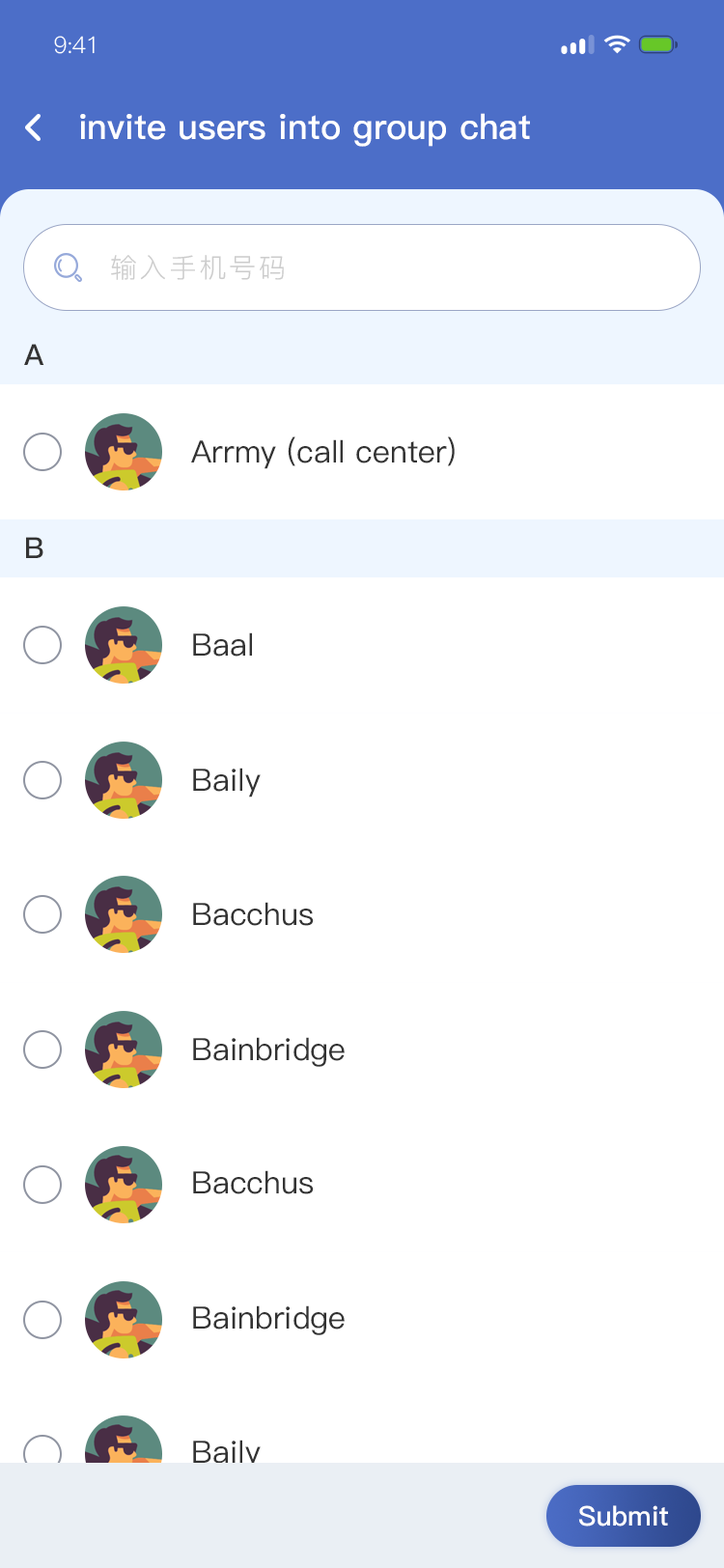
<style>
.page{position:relative;width:724px;height:1568px;background:#ffffff}
.page>*{position:absolute;margin:0}
.t1{font:23.2px "PingFang-SC-Regular";letter-spacing:-0.025em;color:#ffffff}
.t2{font:34.8px "PingFang-SC-Bold";color:#ffffff}
.t3{font:27px "PingFang-SC-Regular";letter-spacing:0.1em;color:#cccccc}
.t4{font:28.9px "PingFang-SC-Bold";letter-spacing:-0.04em;color:#333333}
.t5{font:30.9px "PingFang-SC-Medium";color:#333333}
.t6{font:27px "PingFang-SC-Bold";color:#ffffff}
</style>
<div class="page">
<p class="t1" style="left:54px;top:36px;width:41px;height:18px">9:41</p>
<p class="t2" style="left:80px;top:113px;width:450px;height:34px">invite users into group chat</p>
<p class="t3" style="left:111px;top:255px;width:173px;height:25px">输入手机号码</p>
<p class="t4" style="left:24px;top:344px;width:20px;height:21px">A</p>
<p class="t5" style="left:191px;top:436px;width:264px;height:33px">Arrmy (call center)</p>
<p class="t4" style="left:26px;top:537px;width:17px;height:21px">B</p>
<p class="t5" style="left:193px;top:632px;width:59px;height:25px">Baal</p>
<p class="t5" style="left:193px;top:768px;width:68px;height:30px">Baily</p>
<p class="t5" style="left:193px;top:902px;width:121px;height:24px">Bacchus</p>
<p class="t5" style="left:193px;top:1037px;width:152px;height:30px">Bainbridge</p>
<p class="t5" style="left:193px;top:1170px;width:121px;height:24px">Bacchus</p>
<p class="t5" style="left:193px;top:1305px;width:152px;height:30px">Bainbridge</p>
<p class="t5" style="left:193px;top:1440px;width:68px;height:30px">Baily</p>
<p class="t6" style="left:578px;top:1505px;width:90px;height:21px">Submit</p>
</div>
